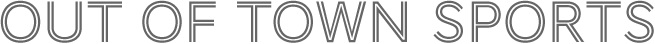
<style>
.page{position:relative;width:655px;height:44px;background:#ffffff}
.page>*{position:absolute;margin:0}
.t1{font:60px "AWConquerorInline-Regular";letter-spacing:0.005em;color:#666666}
</style>
<div class="page">
<p class="t1" style="left:0px;top:0px;width:654px;height:43px">OUT OF TOWN SPORTS</p>
</div>
